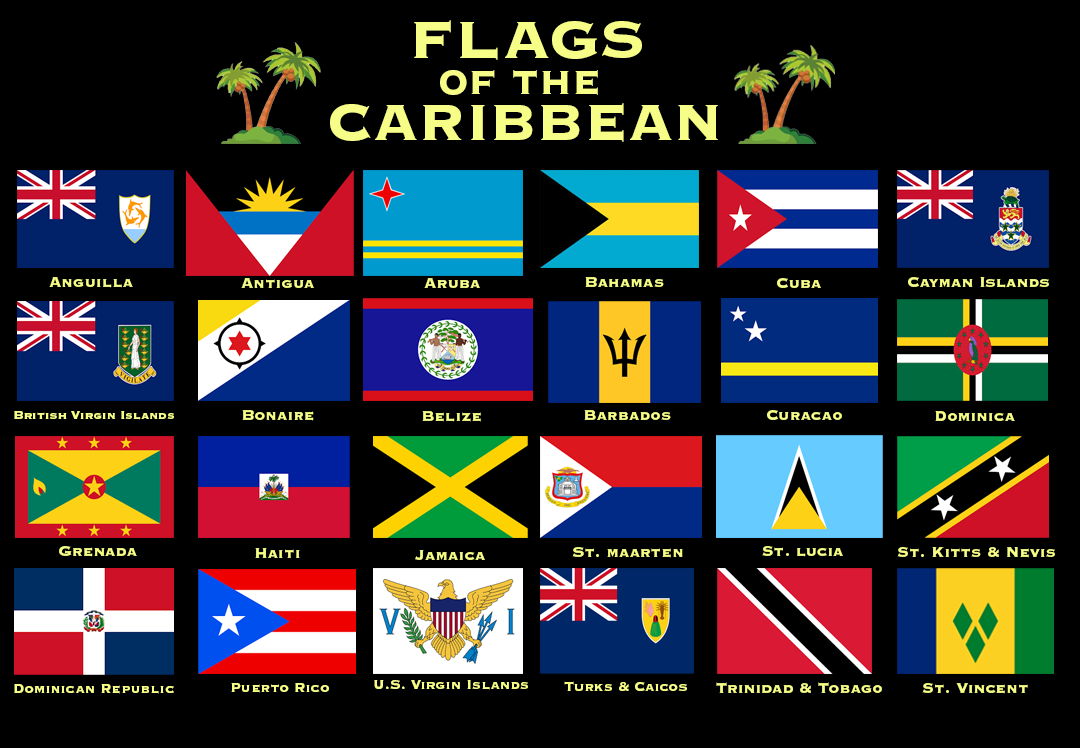
<style>
.page{position:relative;width:1080px;height:748px;background:#000000}
.page>*{position:absolute;margin:0}
.t1{font:69px "CopperplateGothicBT-Heavy";color:#f6fe87}
.t2{font:43px "CopperplateGothicBT-Heavy";color:#f6fe87}
.t3{font:66px "CopperplateGothicBT-Heavy";color:#f6fe87}
.t4{font:18px "CopperplateGothicBT-Heavy";color:#f6fe87}
.t5{font:14px "CopperplateGothicBT-Heavy";color:#f6fe87}
.t6{font:16px "CopperplateGothicBT-Heavy";color:#f6fe87}
</style>
<div class="page">
<p class="t1" style="left:414px;top:20px;width:228px;height:40px">FLAGS</p>
<p class="t2" style="left:440px;top:70px;width:158px;height:25px">OF THE</p>
<p class="t3" style="left:330px;top:103px;width:388px;height:39px">CARIBBEAN</p>
<p class="t4" style="left:49px;top:277px;width:84px;height:11px">Anguilla</p>
<p class="t4" style="left:241px;top:278px;width:73px;height:10px">Antigua</p>
<p class="t4" style="left:424px;top:278px;width:56px;height:10px">Aruba</p>
<p class="t4" style="left:585px;top:277px;width:79px;height:10px">Bahamas</p>
<p class="t4" style="left:777px;top:278px;width:44px;height:10px">Cuba</p>
<p class="t4" style="left:908px;top:277px;width:141px;height:11px">Cayman Islands</p>
<p class="t5" style="left:14px;top:411px;width:160px;height:9px">British Virgin Islands</p>
<p class="t4" style="left:242px;top:410px;width:72px;height:11px">Bonaire</p>
<p class="t4" style="left:422px;top:411px;width:59px;height:11px">Belize</p>
<p class="t4" style="left:584px;top:410px;width:87px;height:10px">Barbados</p>
<p class="t4" style="left:767px;top:410px;width:75px;height:10px">Curacao</p>
<p class="t4" style="left:935px;top:411px;width:80px;height:10px">Dominica</p>
<p class="t4" style="left:59px;top:546px;width:78px;height:11px">Grenada</p>
<p class="t4" style="left:255px;top:548px;width:45px;height:10px">Haiti</p>
<p class="t4" style="left:415px;top:550px;width:70px;height:10px">Jamaica</p>
<p class="t4" style="left:572px;top:547px;width:111px;height:11px">St. maarten</p>
<p class="t4" style="left:762px;top:546px;width:81px;height:11px">St. lucia</p>
<p class="t4" style="left:897px;top:547px;width:158px;height:11px">St. Kitts &amp; Nevis</p>
<p class="t6" style="left:14px;top:684px;width:160px;height:10px">Dominican Republic</p>
<p class="t6" style="left:231px;top:683px;width:98px;height:10px">Puerto Rico</p>
<p class="t6" style="left:374px;top:680px;width:154px;height:10px">U.S. Virgin Islands</p>
<p class="t6" style="left:564px;top:681px;width:123px;height:10px">Turks &amp; Caicos</p>
<p class="t4" style="left:716px;top:682px;width:166px;height:11px">Trinidad &amp; Tobago</p>
<p class="t4" style="left:922px;top:683px;width:106px;height:11px">St. Vincent</p>
</div>
